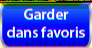
<style>
.page{position:relative;width:92px;height:48px}
.page>*{position:absolute;margin:0}
.t1{font:15.6px "MyriadPro-Semibold";scale:0.96 1}
</style>
<div class="page">
<p class="t1" style="left:7px;top:8px;width:78px;height:29px;text-align:center">Garder<br>dans favoris</p>
</div>
